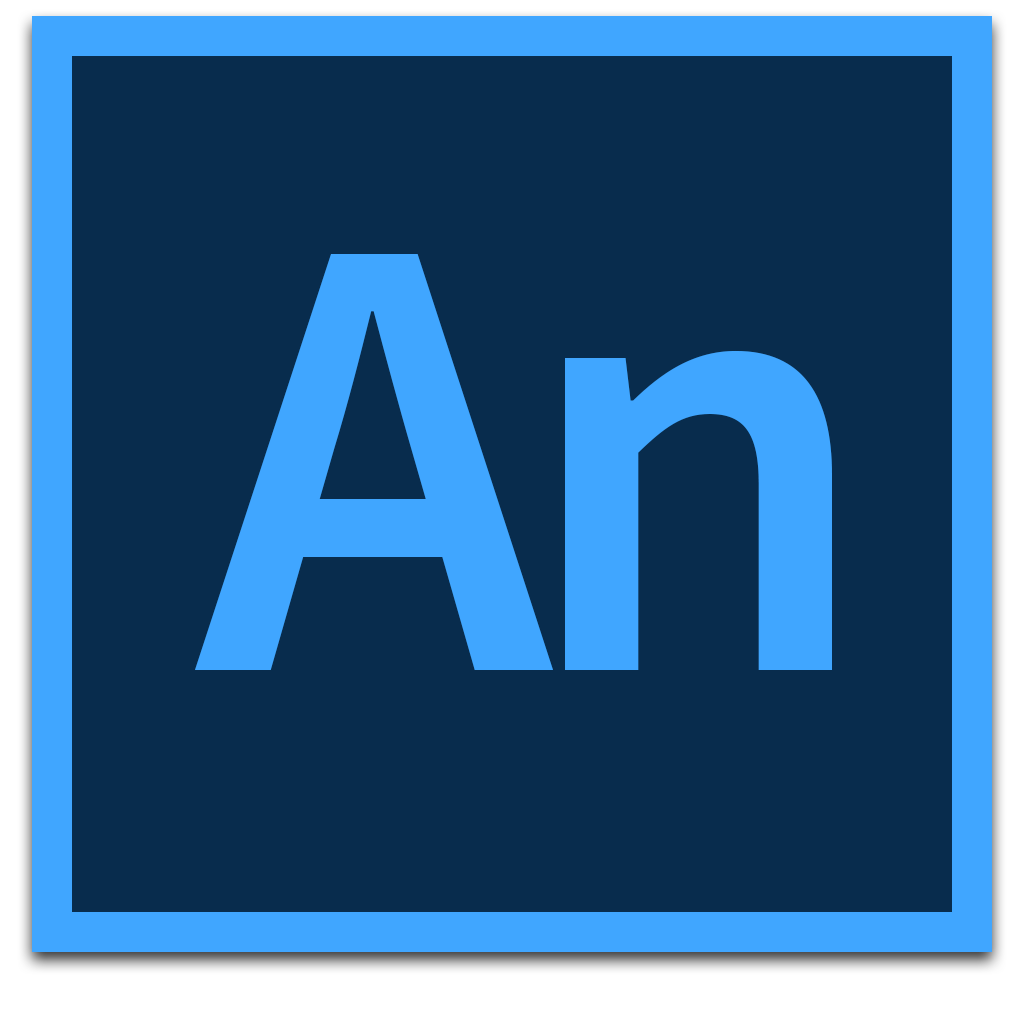
<style>
.page{position:relative;width:1024px;height:1024px;background:#082c4d}
.page>*{position:absolute;margin:0}
.t1{font:636px "SourceSansPro-Semibold";letter-spacing:-0.05em;color:#40a6ff}
</style>
<div class="page">
<p class="t1" style="left:195px;top:254px;width:637px;height:416px">An</p>
</div>
